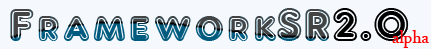
<style>
.page{position:relative;width:431px;height:49px;background:#f5f9fd}
.page>*{position:absolute;margin:0}
.t1{font:48px "DELANEY-Normal"}
.t2{font:24px "ArabicTypesetting";color:#ff0000}
</style>
<div class="page">
<p class="t1" style="left:10px;top:8px;width:399px;height:33px">FrameworkSR2.0</p>
<p class="t2" style="left:392px;top:30px;width:37px;height:18px">alpha</p>
</div>
